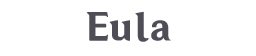
<style>
.page{position:relative;width:256px;height:56px;background:#ffffff}
.page>*{position:absolute;margin:0}
.t1{font:36px "HYWenHei-HEW";color:#4f4e57}
</style>
<div class="page">
<p class="t1" style="left:86px;top:11px;width:85px;height:31px">Eula</p>
</div>
